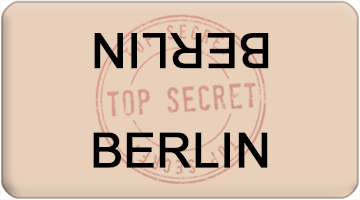
<style>
.page{position:relative;width:360px;height:200px;background:#e8d0bb}
.page>*{position:absolute;margin:0}
.t1{font:48px "ArialMT";color:#000000;font-weight:bold}
</style>
<div class="page">
<p class="t1" style="left:94px;top:33px;width:175px;height:36px;rotate:180deg">BERLIN</p>
<p class="t1" style="left:93px;top:132px;width:175px;height:36px">BERLIN</p>
</div>
